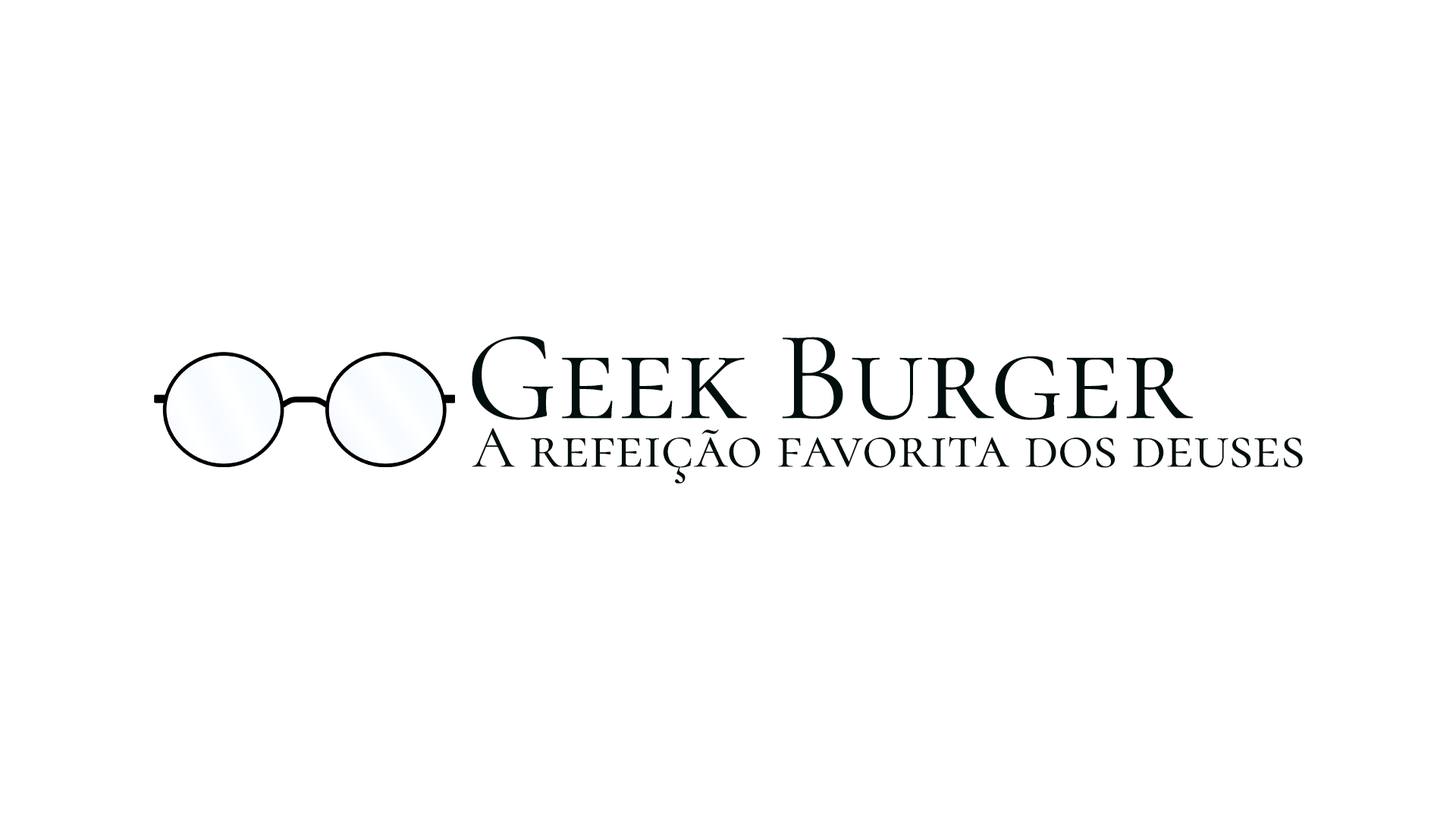
<style>
.page{position:relative;width:1456px;height:819px;background:#ffffff}
.page>*{position:absolute;margin:0}
.t1{font:128.9px "CormorantSC-Regular";color:#000e0e}
.t2{font:60.7px "CormorantSC-Regular";color:#000e0e}
</style>
<div class="page">
<p class="t1" style="left:472px;top:336px;width:721px;height:84px">Geek Burger</p>
<p class="t2" style="left:472px;top:428px;width:831px;height:56px">A refeição favorita dos deuses</p>
</div>
